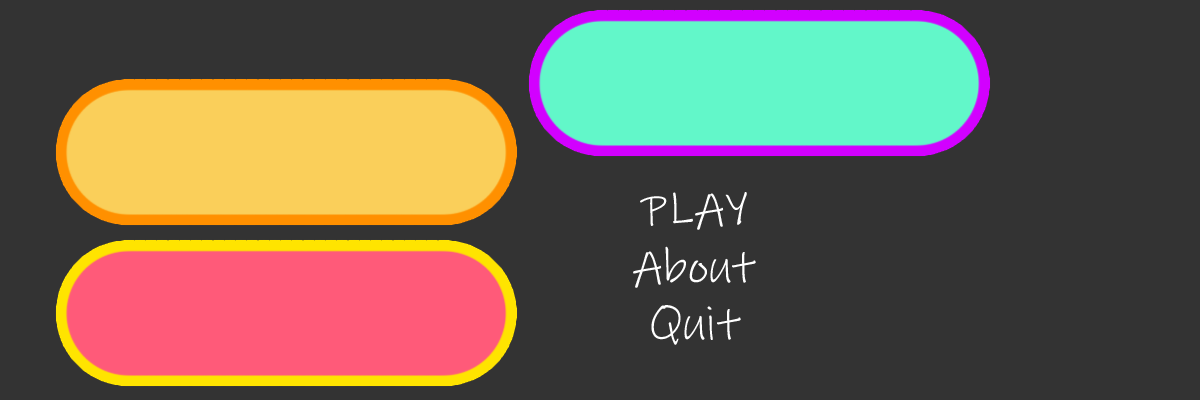
<style>
.page{position:relative;width:1200px;height:400px;background:#333333}
.page>*{position:absolute;margin:0}
.t1{font:48px "InkFree";color:#ffffff}
</style>
<div class="page">
<p class="t1" style="left:633px;top:192px;width:123px;height:153px;text-align:center">PLAY<br>About<br>Quit</p>
</div>
